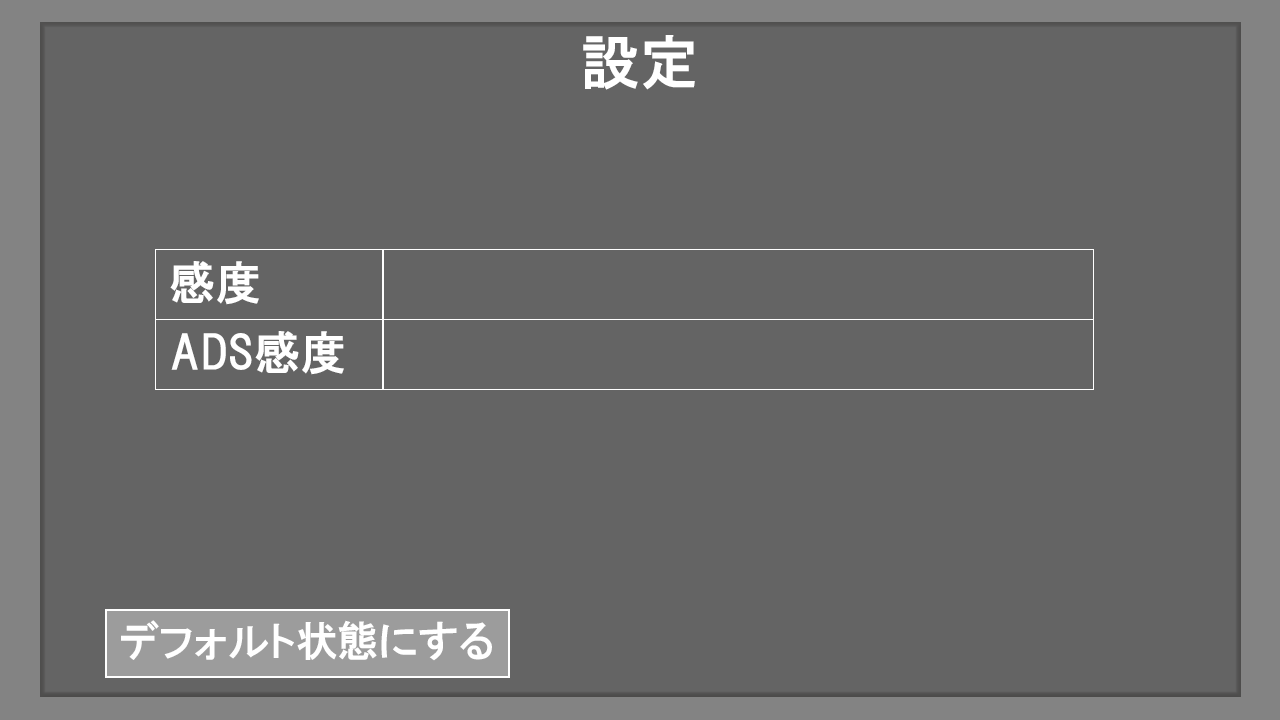
<style>
.page{position:relative;width:1280px;height:720px;background:#646464}
.page>*{position:absolute;margin:0}
.t1{font:58.3px "HGPGothicE";color:#ffffff}
.t2{font:45.8px "HGPGothicE";color:#ffffff}
.t3{font:41.7px "HGPGothicE";color:#ffffff}
</style>
<div class="page">
<p class="t1" style="left:583px;top:35px;width:112px;height:55px">設定</p>
<p class="t2" style="left:170px;top:261px;width:89px;height:44px">感度</p>
<p class="t2" style="left:171px;top:331px;width:173px;height:44px">ADS感度</p>
<p class="t3" style="left:121px;top:620px;width:371px;height:41px">デフォルト状態にする</p>
</div>
